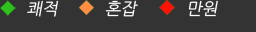
<style>
.page{position:relative;width:256px;height:32px;background:#333333}
.page>*{position:absolute;margin:0}
.t1{font:16.7px "NanumGothic";color:#ffffff;font-style:italic}
</style>
<div class="page">
<p class="t1" style="left:27px;top:0px;width:32px;height:17px">쾌적</p>
<p class="t1" style="left:105px;top:0px;width:33px;height:17px">혼잡</p>
<p class="t1" style="left:188px;top:0px;width:30px;height:17px">만원</p>
</div>
